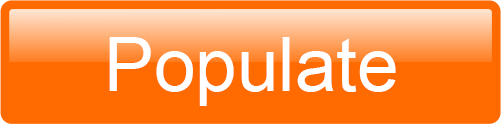
<style>
.page{position:relative;width:501px;height:124px;background:#ff6b01}
.page>*{position:absolute;margin:0}
.t1{font:75px "ArialMT";color:#ffffff}
</style>
<div class="page">
<p class="t1" style="left:109px;top:37px;width:287px;height:69px">Populate</p>
</div>
